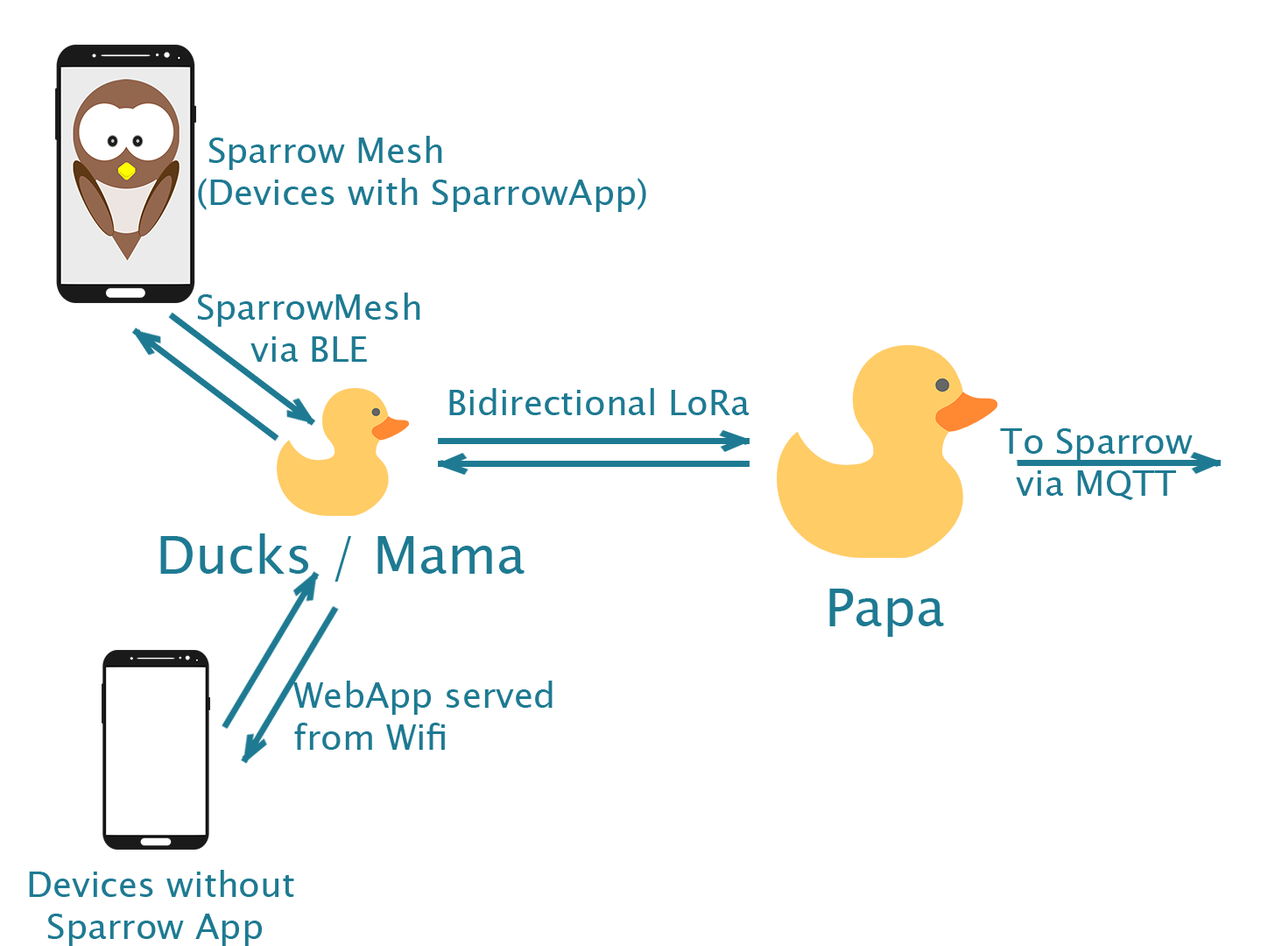
<style>
.page{position:relative;width:1261px;height:946px;background:#ffffff}
.page>*{position:absolute;margin:0}
.t1{font:35px "LucidaSansUnicode";color:#1e7a92}
.t2{font:52.5px "LucidaSansUnicode";color:#1e7a92}
</style>
<div class="page">
<p class="t1" style="left:198px;top:136px;width:448px;height:76px;text-align:right">Sparrow Mesh <br>(Devices with SparrowApp)</p>
<p class="t1" style="left:197px;top:292px;width:223px;height:70px;text-align:center">SparrowMesh<br>via BLE</p>
<p class="t1" style="left:449px;top:388px;width:301px;height:27px">Bidirectional LoRa</p>
<p class="t1" style="left:1000px;top:428px;width:193px;height:72px;text-align:center">To Sparrow<br>via MQTT</p>
<p class="t2" style="left:160px;top:533px;width:365px;height:48px">Ducks / Mama</p>
<p class="t2" style="left:829px;top:588px;width:115px;height:49px">Papa</p>
<p class="t1" style="left:293px;top:680px;width:260px;height:70px;text-align:right">WebApp served<br>from Wifi</p>
<p class="t1" style="left:29px;top:870px;width:265px;height:76px;text-align:center">Devices without <br>Sparrow App</p>
</div>
